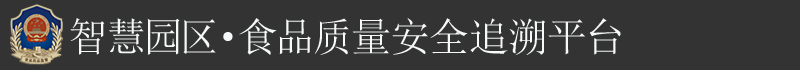
<style>
.page{position:relative;width:800px;height:70px;background:#333333}
.page>*{position:absolute;margin:0}
.t1{font:40px "SimSun";letter-spacing:0.05em;color:#f6f9f9}
</style>
<div class="page">
<p class="t1" style="left:70px;top:18px;width:551px;height:37px">智慧园区·食品质量安全追溯平台</p>
</div>
